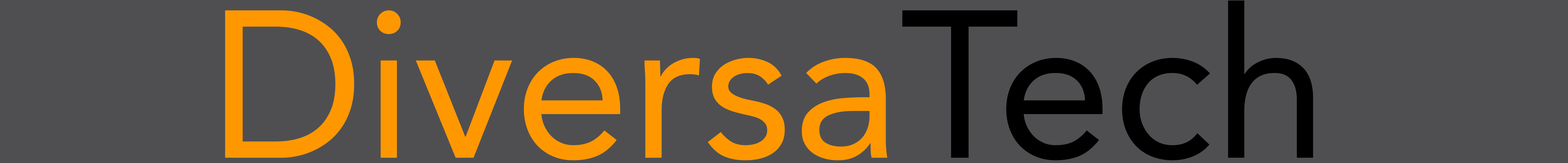
<style>
.page{position:relative;width:1568px;height:163px;background:#4f4f51}
.page>*{position:absolute;margin:0}
.t1{font:208.2px "Avenir-Roman";color:#ff9800}
.t2{font:208.2px "Avenir-Roman";color:#000000}
</style>
<div class="page">
<p class="t1" style="left:225px;top:0px;width:1088px;height:161px">Diversa<span class="t2">Tech</span></p>
</div>
